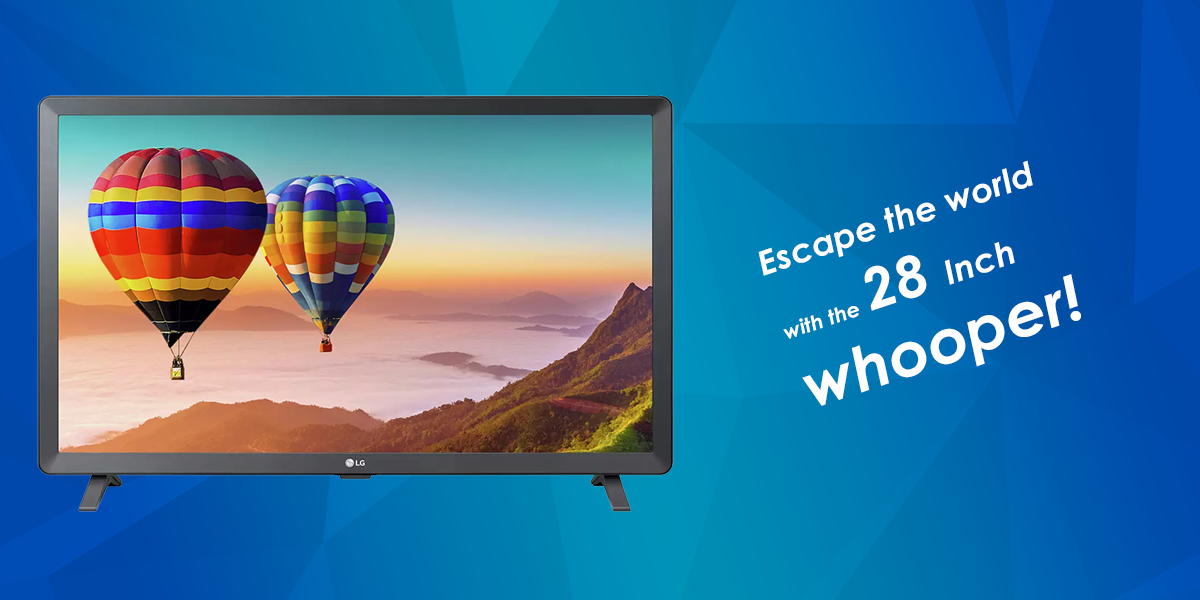
<style>
.page{position:relative;width:1200px;height:600px}
.page>*{position:absolute;margin:0}
.t1{font:33.5px "CenturyGothic-BoldItalic";color:#ffffff;scale:1.03 1}
.t2{font:20.5px "CenturyGothic-BoldItalic";color:#ffffff;scale:1.03 1}
.t3{font:56.5px "CenturyGothic-BoldItalic";color:#ffffff;scale:1.03 1}
.t4{font:61.5px "CenturyGothic-BoldItalic";color:#ffffff;scale:1.03 1}
</style>
<div class="page">
<p class="t1" style="left:758px;top:160px;width:323px;height:246px;rotate:-19deg">Escape the world <br><span class="t2">with the </span><span class="t3">28 </span>Inch <br><span class="t4">whooper!</span></p>
</div>
